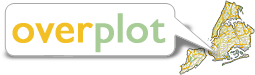
<style>
.page{position:relative;width:255px;height:75px;background:#ffffff}
.page>*{position:absolute;margin:0}
.t1{font:42px "GillSans";color:#f2bf24;font-weight:bold}
.t2{font:42px "GillSans";color:#a7cc95;font-weight:bold}
</style>
<div class="page">
<p class="t1" style="left:12px;top:13px;width:154px;height:40px">over<span class="t2">plot</span></p>
</div>
